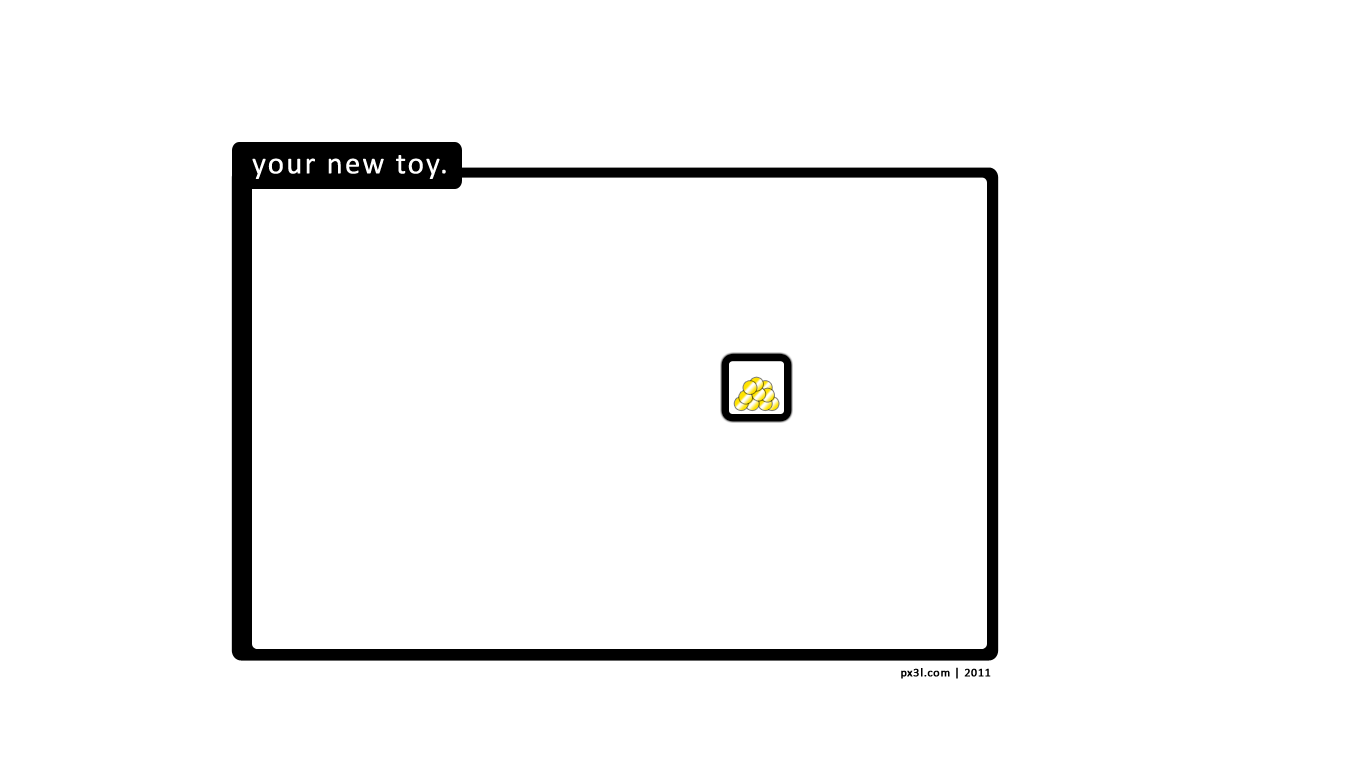
<style>
.page{position:relative;width:1366px;height:768px;background:#ffffff}
.page>*{position:absolute;margin:0}
.t1{font:31px "Calibri";letter-spacing:0.04em;color:#ffffff;font-weight:bold}
.t2{font:12px "Calibri";letter-spacing:0.04em;color:#000000;font-weight:bold}
</style>
<div class="page">
<p class="t1" style="left:252px;top:155px;width:194px;height:24px">your new toy.</p>
<p class="t2" style="left:901px;top:667px;width:90px;height:12px">px3l.com | 2011</p>
</div>
